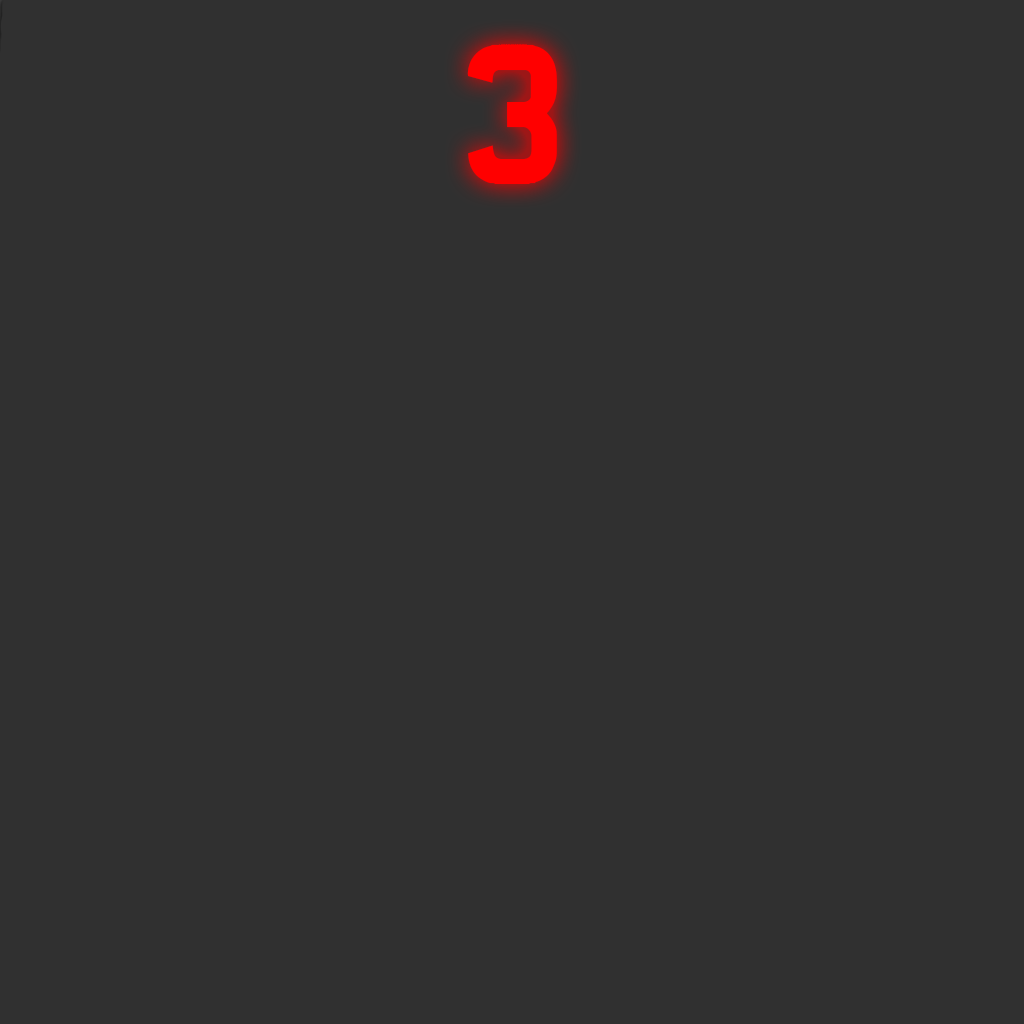
<style>
.page{position:relative;width:1024px;height:1024px;background:#303030}
.page>*{position:absolute;margin:0}
.t1{font:203.8px "UKNumberPlate";color:#ff0000}
</style>
<div class="page">
<p class="t1" style="left:467px;top:43px;width:90px;height:141px">3</p>
</div>
